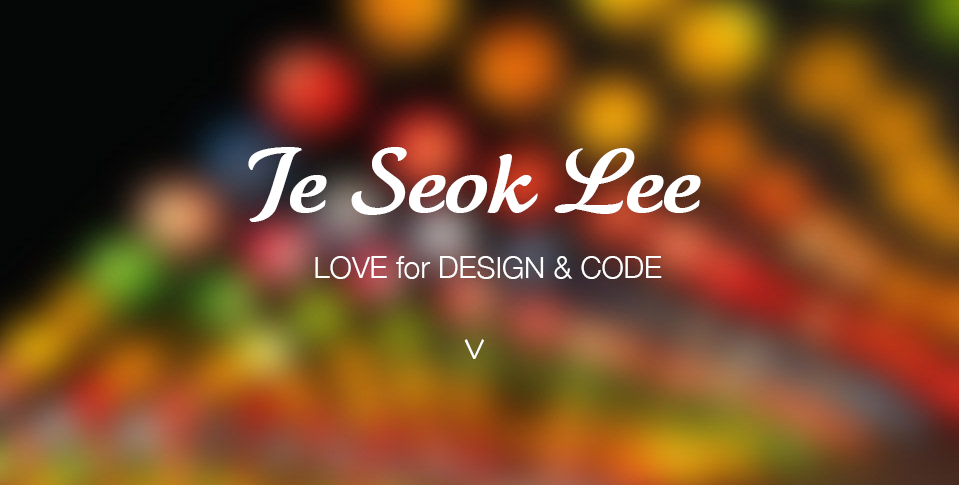
<style>
.page{position:relative;width:959px;height:485px}
.page>*{position:absolute;margin:0}
.t1{font:90px "TartineScriptRegular";color:#ffffff;scale:1.1 1}
.t2{font:30px "HelveticaNeue-Light";color:#ffffff}
.t3{font:30px "Skia-Regular";color:#ffffff}
</style>
<div class="page">
<p class="t1" style="left:248px;top:147px;width:453px;height:75px">Je Seok Lee</p>
<p class="t2" style="left:315px;top:256px;width:347px;height:23px">LOVE for DESIGN &amp; CODE</p>
<p class="t3" style="left:464px;top:339px;width:20px;height:20px">V</p>
</div>
